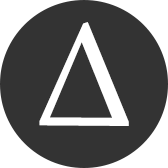
<style>
.page{position:relative;width:168px;height:168px;background:#333333}
.page>*{position:absolute;margin:0}
.t1{font:155.4px "MinionPro-Regular";color:#ffffff;scale:1.03 1}
</style>
<div class="page">
<p class="t1" style="left:39px;top:22px;width:90px;height:104px">Δ</p>
</div>
